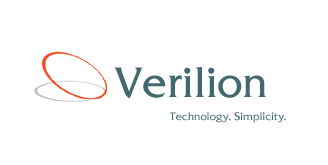
<style>
.page{position:relative;width:328px;height:165px;background:#ffffff}
.page>*{position:absolute;margin:0}
.t1{font:40px "Fritz-Quad";color:#42696d}
.t2{font:10px "Fritz-Quad";color:#42696d}
</style>
<div class="page">
<p class="t1" style="left:114px;top:66px;width:152px;height:33px">Verilion</p>
<p class="t2" style="left:169px;top:112px;width:117px;height:11px">Technology. Simplicity.</p>
</div>
